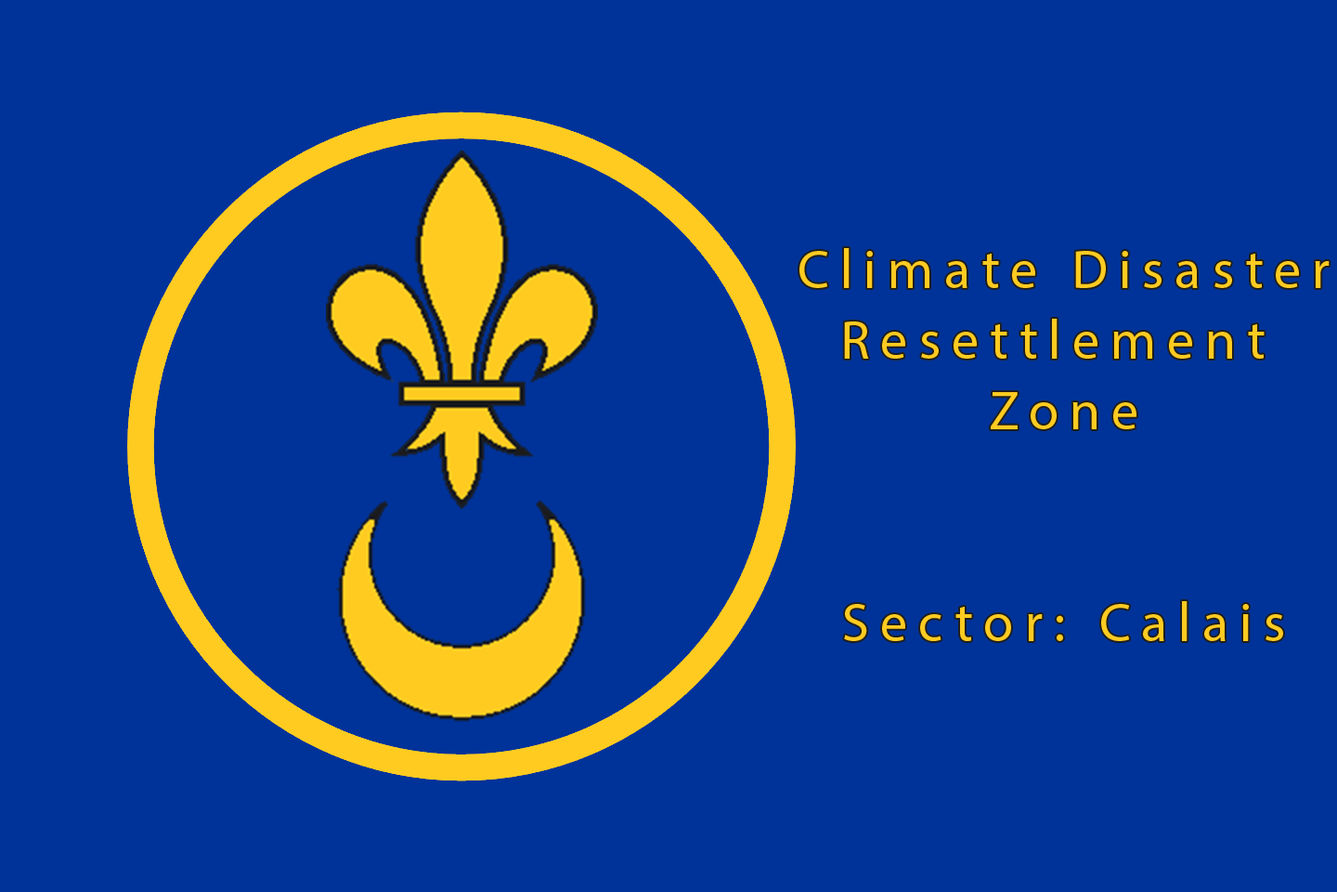
<style>
.page{position:relative;width:1337px;height:892px;background:#003399}
.page>*{position:absolute;margin:0}
.t1{font:54.8px/70.6px "MyriadPro-Regular";letter-spacing:0.2em;color:#ffcb21}
</style>
<div class="page">
<p class="t1" style="left:800px;top:248px;width:530px;height:393px;text-align:center">Climate Disaster<br>Resettlement <br>Zone<br><br><br>Sector: Calais</p>
</div>
